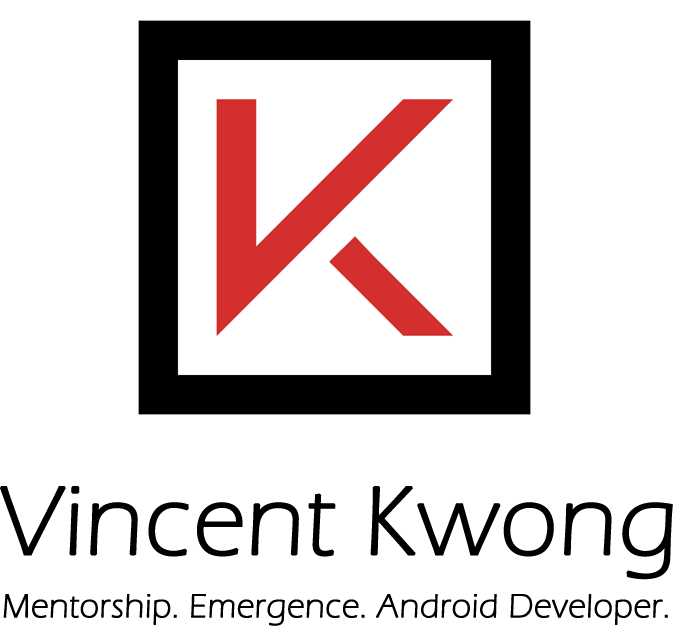
<style>
.page{position:relative;width:673px;height:626px;background:#ffffff}
.page>*{position:absolute;margin:0}
.t1{font:100px "ErasITC-Light";color:#000000;font-weight:bold}
.t2{font:34px "ErasITC-Light";color:#000000;font-weight:bold}
</style>
<div class="page">
<p class="t1" style="left:0px;top:486px;width:673px;height:94px">Vincent Kwong</p>
<p class="t2" style="left:3px;top:594px;width:665px;height:32px">Mentorship. Emergence. Android Developer.</p>
</div>
